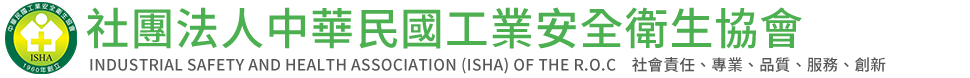
<style>
.page{position:relative;width:970px;height:78px;background:#ffffff}
.page>*{position:absolute;margin:0}
.t1{font:44px "NotoSansCJKtc-Medium";letter-spacing:0.02em;color:#4caf50}
.t2{font:15.6px "NotoSansCJKtc-Medium";letter-spacing:0.02em;color:#565656}
</style>
<div class="page">
<p class="t1" style="left:86px;top:7px;width:716px;height:42px">社團法人中華民國工業安全衛生協會</p>
<p class="t2" style="left:90px;top:57px;width:796px;height:17px">INDUSTRIAL SAFETY AND HEALTH ASSOCIATION (ISHA) OF THE R.O.C    社會責任、專業、品質、服務、創新</p>
</div>
